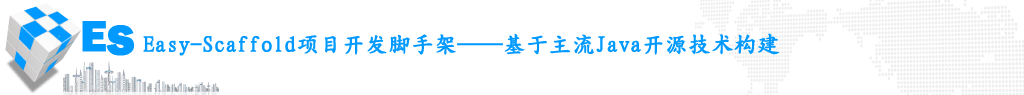
<style>
.page{position:relative;width:1024px;height:95px;background:#ffffff}
.page>*{position:absolute;margin:0}
.t1{font:44.5px/4.2px "FranklinGothic-Heavy";letter-spacing:0.02em;color:#0099ff;font-weight:bold}
.t2{font:22.4px "DFKaiW5-A";color:#0099ff;font-weight:bold}
</style>
<div class="page">
<p class="t1" style="left:82px;top:21px;width:53px;height:35px">E<br>  S</p>
<p class="t2" style="left:143px;top:33px;width:637px;height:23px">Easy-Scaffold项目开发脚手架——基于主流Java开源技术构建</p>
</div>
